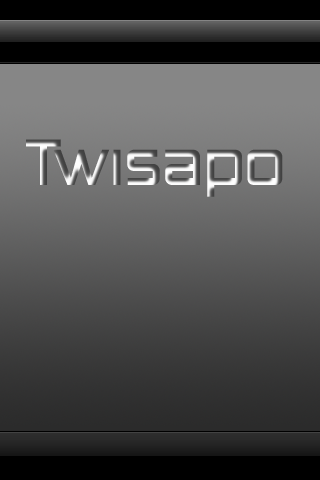
<style>
.page{position:relative;width:320px;height:480px}
.page>*{position:absolute;margin:0}
.t1{font:60px "ZeroThrees"}
</style>
<div class="page">
<p class="t1" style="left:26px;top:139px;width:257px;height:58px">Twisapo</p>
</div>
